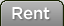
<style>
.page{position:relative;width:64px;height:26px}
.page>*{position:absolute;margin:0}
.t1{font:17px "GothamMedium";letter-spacing:-0.02em;color:#ffffff}
</style>
<div class="page">
<p class="t1" style="left:12px;top:7px;width:38px;height:13px">Rent</p>
</div>
